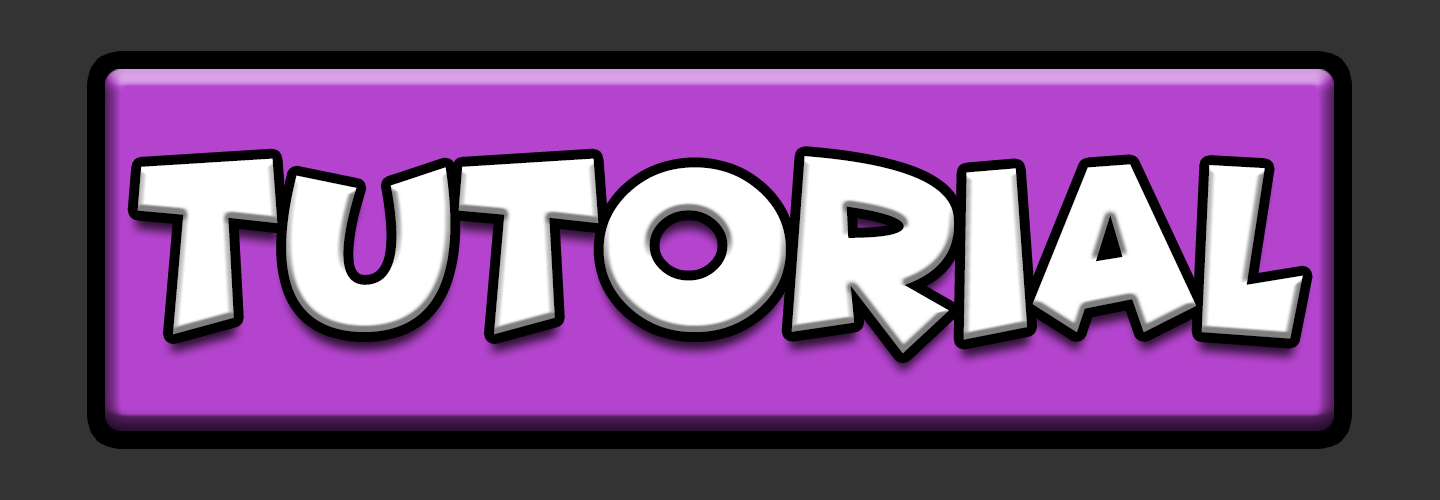
<style>
.page{position:relative;width:1440px;height:500px;background:#333333}
.page>*{position:absolute;margin:0}
.t1{font:240.6px "Funhouse";color:#ffffff;scale:0.95 1}
</style>
<div class="page">
<p class="t1" style="left:137px;top:156px;width:1166px;height:198px">TUTORIAL</p>
</div>
